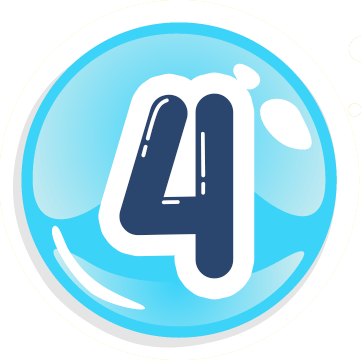
<style>
.page{position:relative;width:361px;height:364px;background:#ffffff}
.page>*{position:absolute;margin:0}
.t1{font:262.5px "BubbleBobble";color:#2a456e}
</style>
<div class="page">
<p class="t1" style="left:119px;top:93px;width:115px;height:186px">4</p>
</div>
